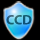
<style>
.page{position:relative;width:40px;height:40px;background:#000000}
.page>*{position:absolute;margin:0}
.t1{font:14px "MyriadPro-Bold";color:#135975}
</style>
<div class="page">
<p class="t1" style="left:6px;top:15px;width:26px;height:10px">CCD</p>
</div>
